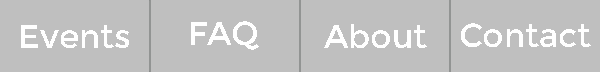
<style>
.page{position:relative;width:600px;height:72px;background:#bfbfbf}
.page>*{position:absolute;margin:0}
.t1{font:33.3px "Montserrat-Regular";color:#ffffff}
</style>
<div class="page">
<p class="t1" style="left:21px;top:25px;width:108px;height:23px">Events</p>
<p class="t1" style="left:191px;top:21px;width:68px;height:29px">FAQ</p>
<p class="t1" style="left:324px;top:24px;width:103px;height:24px">About</p>
<p class="t1" style="left:461px;top:23px;width:130px;height:24px">Contact</p>
</div>
